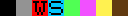
<style>
.page{position:relative;width:128px;height:16px;background:#000000}
.page>*{position:absolute;margin:0}
.t1{font:22.9px "Courier";color:#000000;scale:1.3 1}
</style>
<div class="page">
<p class="t1" style="left:33px;top:1px;width:14px;height:14px">W</p>
</div>
